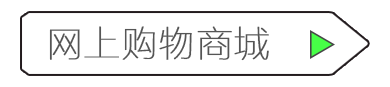
<style>
.page{position:relative;width:390px;height:87px;background:#ffffff}
.page>*{position:absolute;margin:0}
.t1{font:36.4px "FZLTCXHJW--GB1-0";color:#555555;font-weight:bold}
</style>
<div class="page">
<p class="t1" style="left:49px;top:26px;width:220px;height:35px">网上购物商城</p>
</div>
